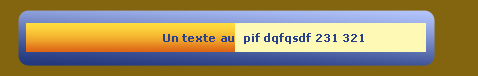
<style>
.page{position:relative;width:478px;height:76px;background:#836510}
.page>*{position:absolute;margin:0}
.t1{font:10.7px "Verdana-Bold";color:#29418c}
</style>
<div class="page">
<p class="t1" style="left:163px;top:33px;width:201px;height:11px">Un texte au  pif dqfqsdf 231 321</p>
</div>
